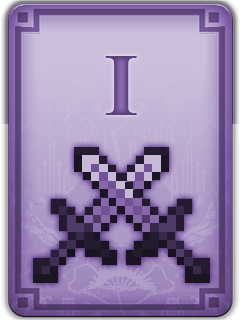
<style>
.page{position:relative;width:240px;height:320px}
.page>*{position:absolute;margin:0}
.t1{font:88.8px "TimesNewRomanPS-BoldMT"}
</style>
<div class="page">
<p class="t1" style="left:105px;top:56px;width:32px;height:59px">I</p>
</div>
